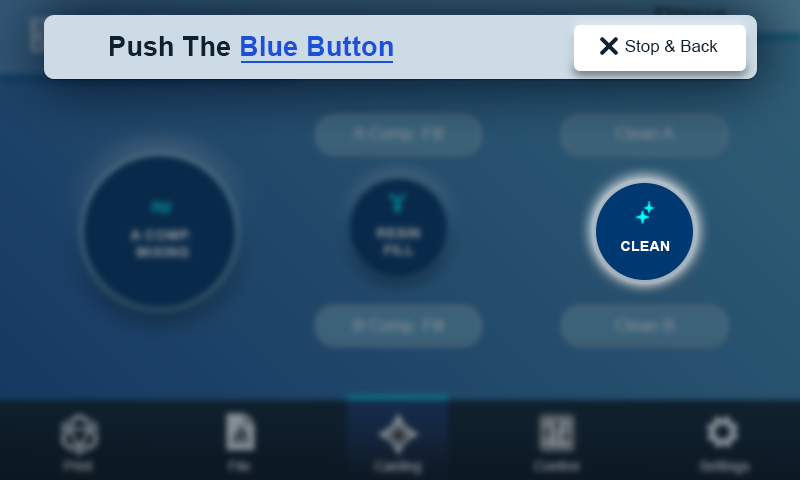
<style>
.page{position:relative;width:800px;height:480px}
.page>*{position:absolute;margin:0}
.t1{font:27.1px "Arial-BoldMT";letter-spacing:0.01em;color:#1b51da}
.t2{font:27.1px "Arial-BoldMT";letter-spacing:0.01em;color:#0f202f}
.t3{font:16.7px "ArialMT";letter-spacing:0.01em;color:#0f202f}
.t4{font:14.4px "Arial-BoldMT";color:#ffffff}
</style>
<div class="page">
<p class="t1" style="left:110px;top:36px;width:283px;height:20px"><span class="t2">Push The </span>Blue Button</p>
<p class="t3" style="left:625px;top:40px;width:93px;height:15px">Stop &amp; Back</p>
<p class="t4" style="left:621px;top:241px;width:49px;height:10px">CLEAN</p>
</div>
